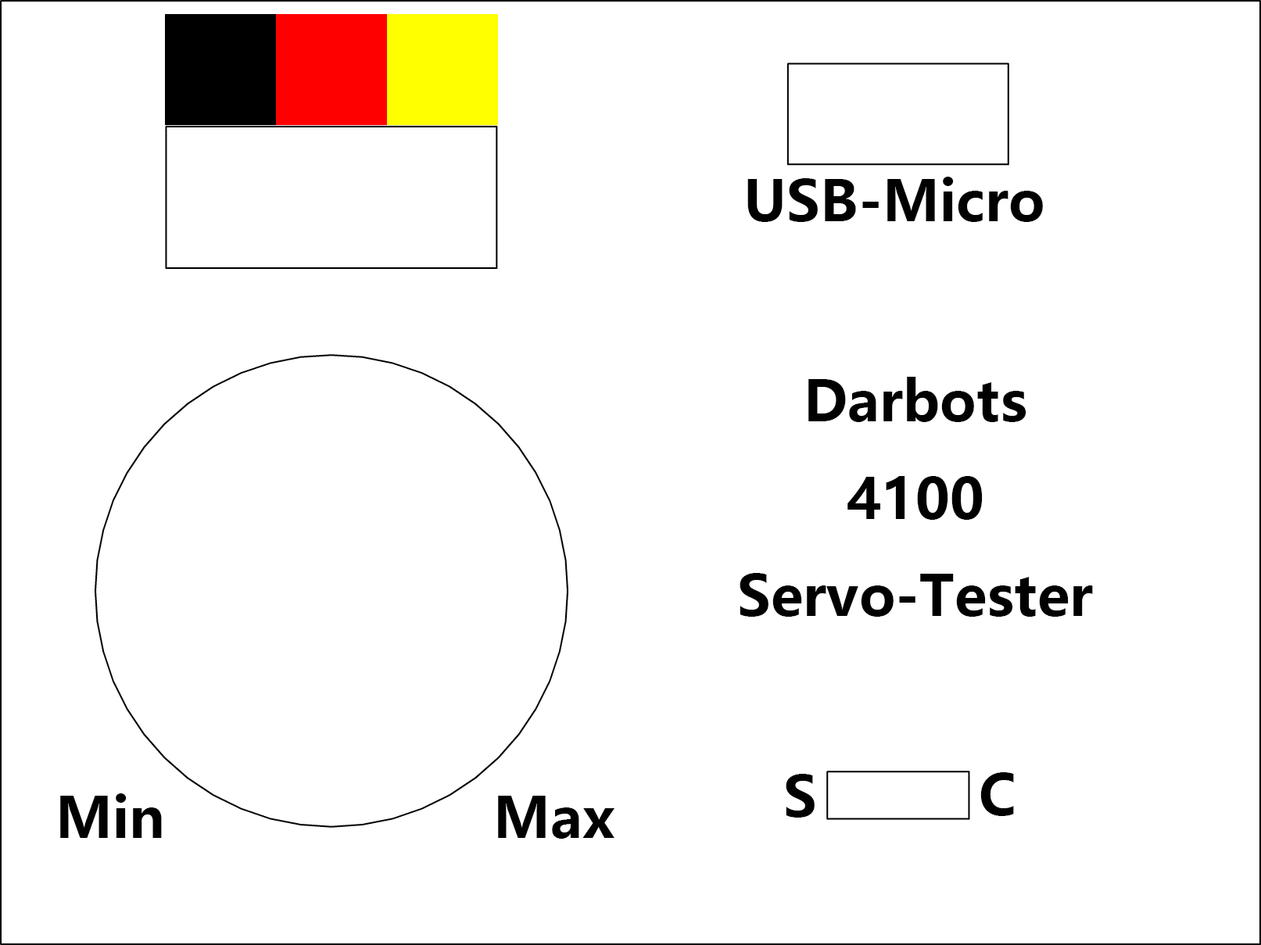
<style>
.page{position:relative;width:1261px;height:945px;background:#ffffff}
.page>*{position:absolute;margin:0}
.t1{font:55.6px "MicrosoftYaHei-Bold";color:#010101}
</style>
<div class="page">
<p class="t1" style="left:748px;top:177px;width:295px;height:45px">USB-Micro</p>
<p class="t1" style="left:740px;top:377px;width:353px;height:240px;text-align:center">Darbots<br>4100<br>Servo-Tester</p>
<p class="t1" style="left:981px;top:773px;width:33px;height:43px">C</p>
<p class="t1" style="left:786px;top:774px;width:29px;height:44px">S</p>
<p class="t1" style="left:60px;top:794px;width:102px;height:44px">Min</p>
<p class="t1" style="left:498px;top:796px;width:117px;height:43px">Max</p>
</div>
